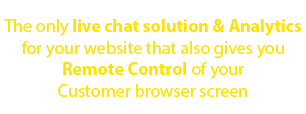
<style>
.page{position:relative;width:306px;height:114px;background:#ffffff}
.page>*{position:absolute;margin:0}
.t1{font:18px "MyriadPro-Regular";color:#fee300}
.t2{font:18px "MyriadPro-Bold";color:#fee300}
</style>
<div class="page">
<p class="t1" style="left:4px;top:19px;width:297px;height:78px;text-align:center">The only <span class="t2">live chat solution &amp; Analytics<br></span>for your website that also gives you<br><span class="t2">Remote Control</span> of your<br>Customer browser screen</p>
</div>
